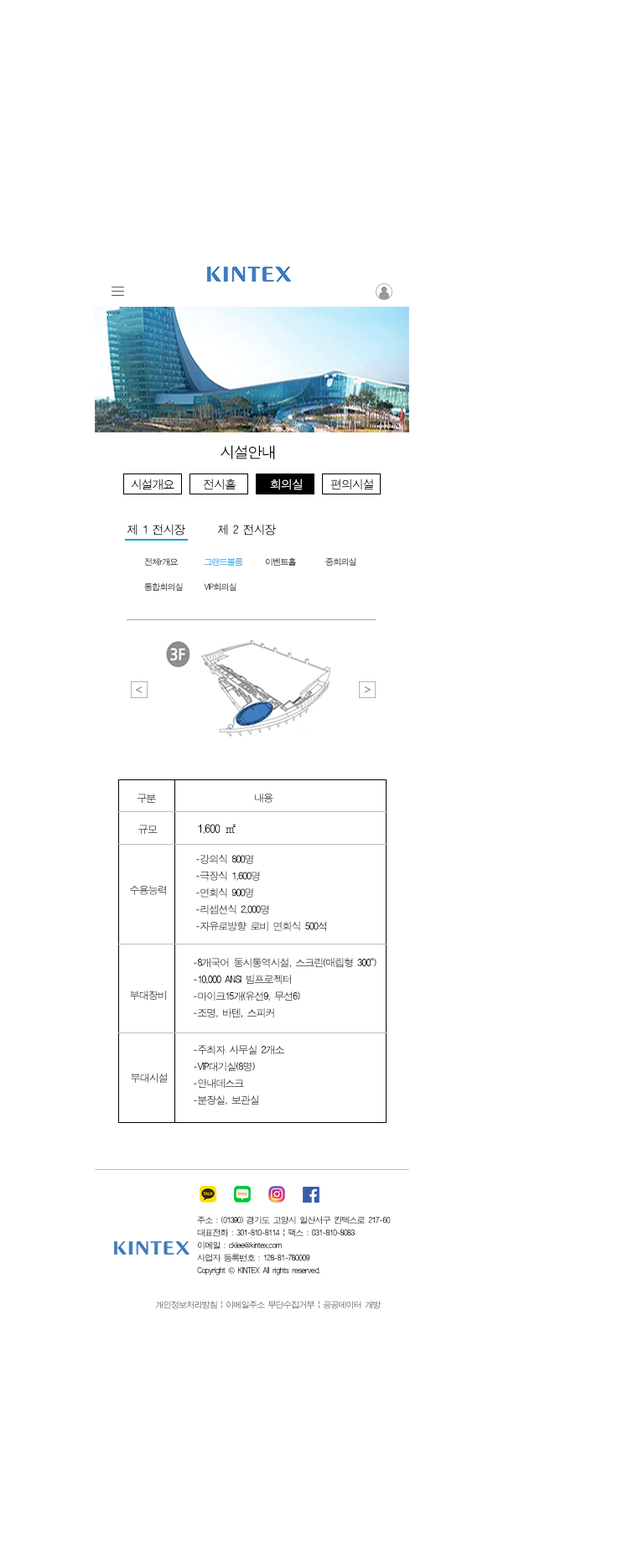
<style>
.page{position:relative;width:623px;height:1568px;background:#ffffff}
.page>*{position:absolute;margin:0}
.t1{font:15.1px "ÈÞ¸Õ°íµñ";letter-spacing:-0.08em;color:#010101}
.t2{font:11.7px "ÈÞ¸Õ°íµñ";letter-spacing:-0.08em;color:#000000}
.t3{font:11.7px "ÈÞ¸Õ°íµñ";letter-spacing:-0.08em;color:#010101}
.t4{font:11.7px "ÈÞ¸Õ°íµñ";letter-spacing:-0.08em;color:#ffffff}
.t5{font:8.4px/25.1px "ÈÞ¸Õ°íµñ";letter-spacing:-0.08em}
.t6{font:10.1px "ÈÞ¸Õ°íµñ";letter-spacing:-0.08em}
.t7{font:11.7px "ÈÞ¸Õ°íµñ";letter-spacing:-0.08em;color:#070707}
.t8{font:10.1px/16.8px "ÈÞ¸Õ°íµñ";letter-spacing:-0.08em;color:#070707}
.t9{font:10.1px "ÈÞ¸Õ°íµñ";letter-spacing:-0.08em;color:#070707}
.t10{font:8.4px/12.6px "ÈÞ¸Õ°íµñ";letter-spacing:-0.08em;color:#020202}
.t11{font:8.4px/12.6px "Gulim";letter-spacing:-0.08em;color:#020202}
.t12{font:8.4px "ÈÞ¸Õ°íµñ";letter-spacing:-0.08em}
</style>
<div class="page">
<p class="t1" style="left:220px;top:445px;width:55px;height:14px">시설안내</p>
<p class="t2" style="left:131px;top:479px;width:43px;height:11px">시설개요</p>
<p class="t3" style="left:203px;top:479px;width:33px;height:11px">전시홀</p>
<p class="t4" style="left:270px;top:479px;width:32px;height:11px">회의실</p>
<p class="t2" style="left:330px;top:479px;width:43px;height:11px">편의시설</p>
<p class="t2" style="left:127px;top:524px;width:149px;height:12px">제 1 전시장   제 2 전시장</p>
<p class="t5" style="left:144px;top:558px;width:212px;height:33px">전체r개요 그랜드볼룸 이벤트홀 중회의실 <br>통합회의실 VIP회의실</p>
<p class="t6" style="left:137px;top:794px;width:19px;height:10px">구분</p>
<p class="t6" style="left:255px;top:793px;width:18px;height:10px">내용</p>
<p class="t6" style="left:138px;top:825px;width:20px;height:10px">규모</p>
<p class="t7" style="left:198px;top:824px;width:37px;height:11px">1,600 ㎡</p>
<p class="t8" style="left:196px;top:854px;width:131px;height:77px">-강의식 800명<br>-극장식 1,600명<br>-연회식 900명<br>-리셉션식 2,000명<br>-자유로방향 로비 연회식 500석</p>
<p class="t9" style="left:130px;top:885px;width:36px;height:10px">수용능력</p>
<p class="t8" style="left:194px;top:958px;width:182px;height:60px">-8개국어 동시통역시설, 스크린(매립형 300")<br>-10,000 ANSI 빔프로젝터<br>-마이크15개(유선9, 무선6)<br>-조명, 바텐, 스피커</p>
<p class="t6" style="left:130px;top:991px;width:36px;height:10px">부대장비</p>
<p class="t8" style="left:194px;top:1045px;width:90px;height:60px">-주최자 사무실 2개소<br>-VIP대기실(8명)<br>-안내데스크<br>-분장실, 보관실</p>
<p class="t6" style="left:131px;top:1073px;width:36px;height:10px">부대시설</p>
<p class="t10" style="left:197px;top:1216px;width:194px;height:60px">주소 : (01390) 경기도 고양시 일산서구 킨텍스로 217-60<br>대표전화 : 301-810-8114 | 팩스 : 031-810-8083<br>이메일 : cklee@kintex.com <br>사업자 등록번호 : 128-81-780009<br>Copyright <span class="t11">©</span> KINTEX All rights reserved.</p>
<p class="t12" style="left:155px;top:1301px;width:225px;height:8px">개인정보처리방침 | 이메일주소 무단수집거부 | 공공데이터 개방</p>
</div>
